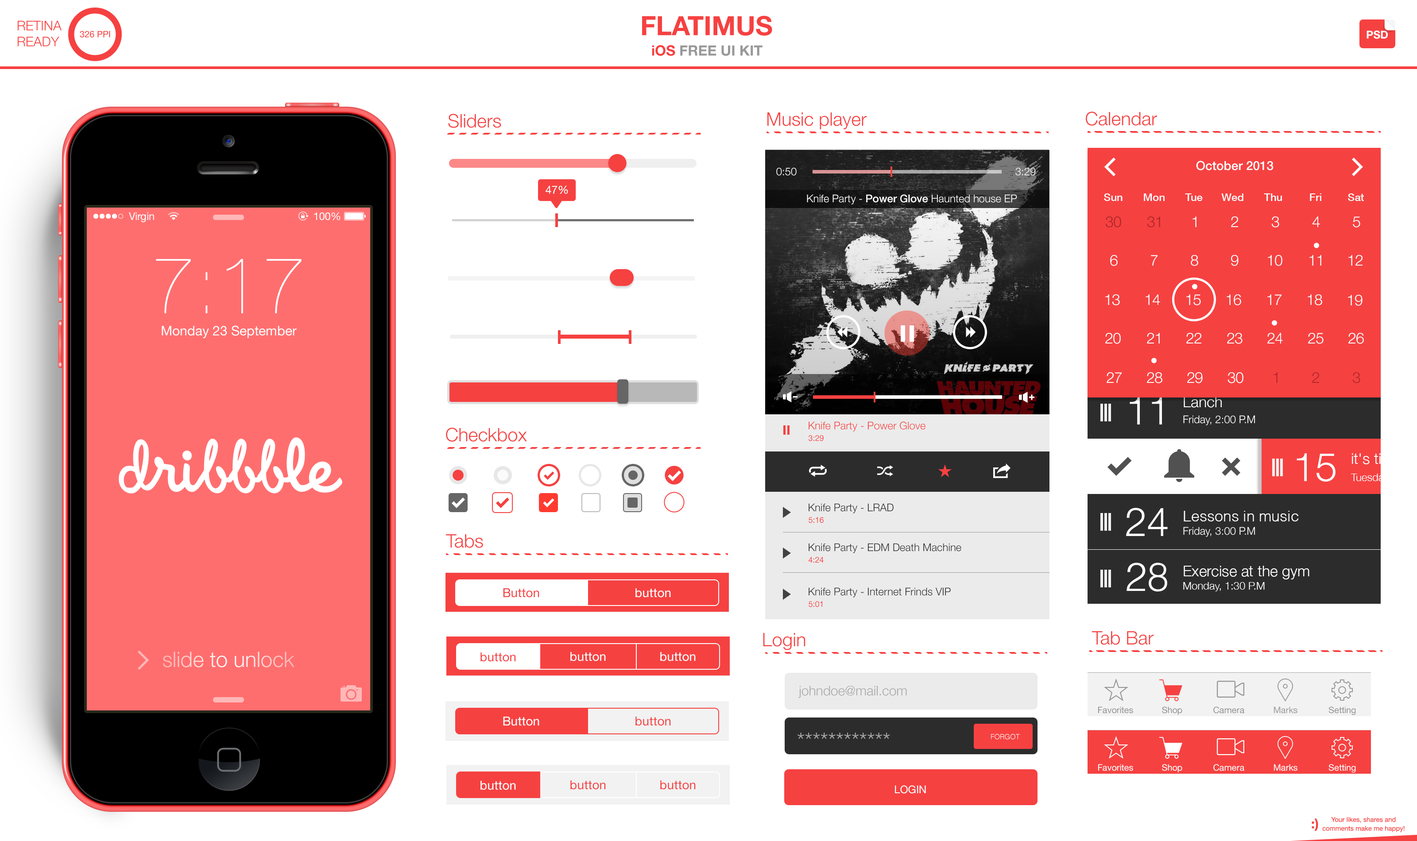
<style>
.page{position:relative;width:1417px;height:841px;background:#ffffff}
.page>*{position:absolute;margin:0}
.t1{font:18.6px "HelveticaNeue-Light";color:#f64141}
.t2{font:12.4px "HelveticaNeue-Medium";color:#ffffff}
.t3{font:10.6px "HelveticaNeue-Light";color:#ffffff}
.t4{font:11.1px "HelveticaNeue";color:#f3f3f3}
.t5{font:10.6px "HelveticaNeue-Medium";color:#ffffff}
.t6{font:15.1px "HelveticaNeue-Light";color:#aa2626}
.t7{font:15.1px "HelveticaNeue-Light";color:#ffffff}
.t8{font:15.1px "HelveticaNeue-Light";color:#b02828}
.t9{font:39.9px "HelveticaNeue-Light";color:#ffffff}
.t10{font:10.6px "HelveticaNeue-Light";color:#f64141}
.t11{font:8px "HelveticaNeue";color:#f64141}
.t12{font:10.6px "HelveticaNeue-Light";color:#2c2c2c}
.t13{font:15.1px "Helvetica-Light";color:#ffffff}
.t14{font:39.9px "Helvetica-Light";color:#ffffff}
.t15{font:12.4px "HelveticaNeue";color:#f64141}
.t16{font:12.4px "HelveticaNeue";color:#ffffff}
.t17{font:13.3px "HelveticaNeue-Light";color:#aaaaaa}
.t18{font:8.9px "HelveticaNeue";color:#929292}
.t19{font:8.9px "HelveticaNeue";color:#9b9b9b}
.t20{font:22.1px "HelveticaNeue-Light";color:#aaaaaa}
.t21{font:7.1px "Helvetica-Light";color:#fcfcfc;text-transform:uppercase}
.t22{font:8.9px "HelveticaNeue";color:#ffffff}
.t23{font:10.6px "HelveticaNeue";color:#ffffff;text-transform:uppercase}
.t24{font:13.3px "HelveticaNeue-Bold";color:#f64141}
.t25{font:6.6px/8.9px "HelveticaNeue";color:#f64141}
</style>
<div class="page">
<p class="t1" style="left:448px;top:114px;width:53px;height:14px">Sliders</p>
<p class="t1" style="left:767px;top:112px;width:100px;height:17px">Music player</p>
<p class="t1" style="left:1086px;top:112px;width:71px;height:14px">Calendar</p>
<p class="t2" style="left:1196px;top:161px;width:78px;height:10px">October 2013</p>
<p class="t3" style="left:776px;top:168px;width:21px;height:8px">0:50</p>
<p class="t3" style="left:1015px;top:168px;width:21px;height:8px">3:29</p>
<p class="t4" style="left:546px;top:186px;width:22px;height:8px">47%</p>
<p class="t3" style="left:807px;top:194px;width:210px;height:11px">Knife Party - <span class="t5">Power Glove</span> Haunted house EP</p>
<p class="t5" style="left:1104px;top:194px;width:19px;height:7px">Sun</p>
<p class="t5" style="left:1144px;top:194px;width:21px;height:7px">Mon</p>
<p class="t5" style="left:1185px;top:194px;width:18px;height:7px">Tue</p>
<p class="t5" style="left:1221px;top:194px;width:23px;height:7px">Wed</p>
<p class="t5" style="left:1264px;top:194px;width:18px;height:7px">Thu</p>
<p class="t5" style="left:1310px;top:194px;width:11px;height:7px">Fri</p>
<p class="t5" style="left:1348px;top:194px;width:16px;height:7px">Sat</p>
<p class="t6" style="left:1106px;top:217px;width:15px;height:11px">30</p>
<p class="t6" style="left:1147px;top:217px;width:13px;height:11px">31</p>
<p class="t7" style="left:1193px;top:217px;width:4px;height:10px">1</p>
<p class="t7" style="left:1231px;top:217px;width:7px;height:10px">2</p>
<p class="t7" style="left:1272px;top:217px;width:7px;height:11px">3</p>
<p class="t7" style="left:1313px;top:217px;width:7px;height:10px">4</p>
<p class="t7" style="left:1353px;top:217px;width:7px;height:11px">5</p>
<p class="t7" style="left:1110px;top:255px;width:8px;height:11px">6</p>
<p class="t7" style="left:1151px;top:255px;width:7px;height:11px">7</p>
<p class="t7" style="left:1191px;top:255px;width:7px;height:11px">8</p>
<p class="t7" style="left:1231px;top:255px;width:8px;height:11px">9</p>
<p class="t7" style="left:1268px;top:255px;width:15px;height:11px">10</p>
<p class="t7" style="left:1310px;top:255px;width:11px;height:11px">11</p>
<p class="t7" style="left:1349px;top:255px;width:14px;height:11px">12</p>
<p class="t7" style="left:1105px;top:295px;width:15px;height:11px">13</p>
<p class="t7" style="left:1146px;top:295px;width:14px;height:10px">14</p>
<p class="t7" style="left:1186px;top:295px;width:15px;height:11px">15</p>
<p class="t7" style="left:1227px;top:295px;width:14px;height:11px">16</p>
<p class="t7" style="left:1267px;top:295px;width:15px;height:10px">17</p>
<p class="t7" style="left:1308px;top:295px;width:14px;height:11px">18</p>
<p class="t7" style="left:1348px;top:295px;width:15px;height:11px">19</p>
<p class="t7" style="left:1105px;top:333px;width:16px;height:11px">20</p>
<p class="t7" style="left:1147px;top:333px;width:13px;height:11px">21</p>
<p class="t7" style="left:1186px;top:333px;width:15px;height:11px">22</p>
<p class="t7" style="left:1227px;top:333px;width:16px;height:11px">23</p>
<p class="t7" style="left:1267px;top:333px;width:16px;height:11px">24</p>
<p class="t7" style="left:1308px;top:333px;width:16px;height:11px">25</p>
<p class="t7" style="left:1349px;top:333px;width:15px;height:11px">26</p>
<p class="t7" style="left:1107px;top:372px;width:15px;height:11px">27</p>
<p class="t7" style="left:1147px;top:372px;width:16px;height:12px">28</p>
<p class="t7" style="left:1187px;top:372px;width:16px;height:12px">29</p>
<p class="t7" style="left:1228px;top:372px;width:16px;height:12px">30</p>
<p class="t8" style="left:1274px;top:372px;width:4px;height:11px">1</p>
<p class="t8" style="left:1312px;top:372px;width:7px;height:11px">2</p>
<p class="t8" style="left:1353px;top:372px;width:7px;height:12px">3</p>
<p class="t9" style="left:1130px;top:397px;width:32px;height:28px">11</p>
<p class="t7" style="left:1184px;top:396px;width:38px;height:12px">Lanch</p>
<p class="t10" style="left:809px;top:422px;width:117px;height:10px">Knife Party - Power Glove</p>
<p class="t3" style="left:1183px;top:415px;width:72px;height:11px">Friday, 2:00 P.M</p>
<p class="t1" style="left:446px;top:428px;width:81px;height:14px">Checkbox</p>
<p class="t11" style="left:809px;top:435px;width:15px;height:7px">3:29</p>
<p class="t9" style="left:1297px;top:453px;width:39px;height:29px">15</p>
<p class="t7" style="left:1352px;top:453px;width:66px;height:12px">it's time to</p>
<p class="t3" style="left:1351px;top:474px;width:38px;height:9px">Tuesday</p>
<p class="t12" style="left:809px;top:504px;width:85px;height:10px">Knife Party - LRAD</p>
<p class="t9" style="left:1126px;top:508px;width:42px;height:28px">24</p>
<p class="t11" style="left:809px;top:517px;width:15px;height:6px">5:16</p>
<p class="t13" style="left:1184px;top:511px;width:115px;height:11px">Lessons in music</p>
<p class="t3" style="left:1183px;top:527px;width:72px;height:10px">Friday, 3:00 P.M</p>
<p class="t1" style="left:446px;top:535px;width:37px;height:13px">Tabs</p>
<p class="t12" style="left:809px;top:543px;width:152px;height:11px">Knife Party - EDM Death Machine</p>
<p class="t11" style="left:809px;top:557px;width:15px;height:6px">4:24</p>
<p class="t14" style="left:1127px;top:563px;width:40px;height:29px">28</p>
<p class="t7" style="left:1184px;top:566px;width:126px;height:14px">Exercise at the gym</p>
<p class="t15" style="left:503px;top:589px;width:36px;height:9px">Button</p>
<p class="t16" style="left:636px;top:589px;width:35px;height:9px">button</p>
<p class="t12" style="left:809px;top:588px;width:142px;height:10px">Knife Party - Internet Frinds VIP</p>
<p class="t3" style="left:1183px;top:582px;width:82px;height:10px">Monday, 1:30 P.M</p>
<p class="t11" style="left:809px;top:601px;width:13px;height:7px">5:01</p>
<p class="t1" style="left:763px;top:633px;width:43px;height:18px">Login</p>
<p class="t1" style="left:1092px;top:632px;width:62px;height:13px">Tab Bar</p>
<p class="t15" style="left:481px;top:653px;width:35px;height:9px">button</p>
<p class="t16" style="left:570px;top:652px;width:36px;height:10px">button</p>
<p class="t16" style="left:660px;top:652px;width:36px;height:10px">button</p>
<p class="t17" style="left:798px;top:686px;width:109px;height:12px">johndoe@mail.com</p>
<p class="t18" style="left:1098px;top:707px;width:35px;height:7px">Favorites</p>
<p class="t18" style="left:1162px;top:707px;width:20px;height:8px">Shop</p>
<p class="t18" style="left:1213px;top:707px;width:31px;height:7px">Camera</p>
<p class="t19" style="left:1274px;top:707px;width:24px;height:7px">Marks</p>
<p class="t18" style="left:1329px;top:707px;width:27px;height:9px">Setting</p>
<p class="t16" style="left:503px;top:717px;width:36px;height:9px">Button</p>
<p class="t15" style="left:636px;top:717px;width:35px;height:9px">button</p>
<p class="t20" style="left:798px;top:733px;width:92px;height:7px">************</p>
<p class="t21" style="left:991px;top:734px;width:29px;height:6px">Forgot</p>
<p class="t22" style="left:1098px;top:764px;width:35px;height:7px">Favorites</p>
<p class="t22" style="left:1162px;top:764px;width:20px;height:9px">Shop</p>
<p class="t22" style="left:1213px;top:764px;width:31px;height:7px">Camera</p>
<p class="t22" style="left:1274px;top:764px;width:24px;height:7px">Marks</p>
<p class="t22" style="left:1329px;top:764px;width:27px;height:9px">Setting</p>
<p class="t16" style="left:481px;top:781px;width:35px;height:10px">button</p>
<p class="t15" style="left:570px;top:781px;width:36px;height:9px">button</p>
<p class="t15" style="left:660px;top:781px;width:36px;height:9px">button</p>
<p class="t23" style="left:895px;top:786px;width:31px;height:8px">Login</p>
<p class="t24" style="left:1312px;top:819px;width:6px;height:12px">:)</p>
<p class="t25" style="left:1322px;top:818px;width:83px;height:15px;text-align:center">Your likes, shares and comments make me happy!</p>
</div>
